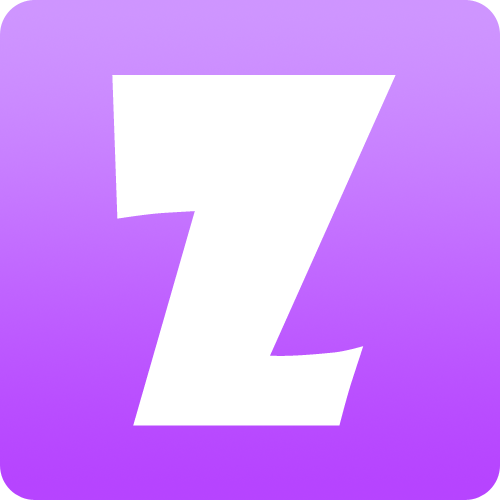
<style>
.page{position:relative;width:500px;height:500px;background:#ffffff}
.page>*{position:absolute;margin:0}
.t1{font:466.9px "ShowcardGothic-Reg";color:#ffffff}
</style>
<div class="page">
<p class="t1" style="left:112px;top:75px;width:284px;height:351px">Z</p>
</div>
